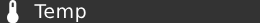
<style>
.page{position:relative;width:260px;height:23px;background:#333333}
.page>*{position:absolute;margin:0}
.t1{font:19px "SegoeUI-Semilight";letter-spacing:0.028em;color:#ffffff}
</style>
<div class="page">
<p class="t1" style="left:34px;top:4px;width:52px;height:18px">Temp</p>
</div>
